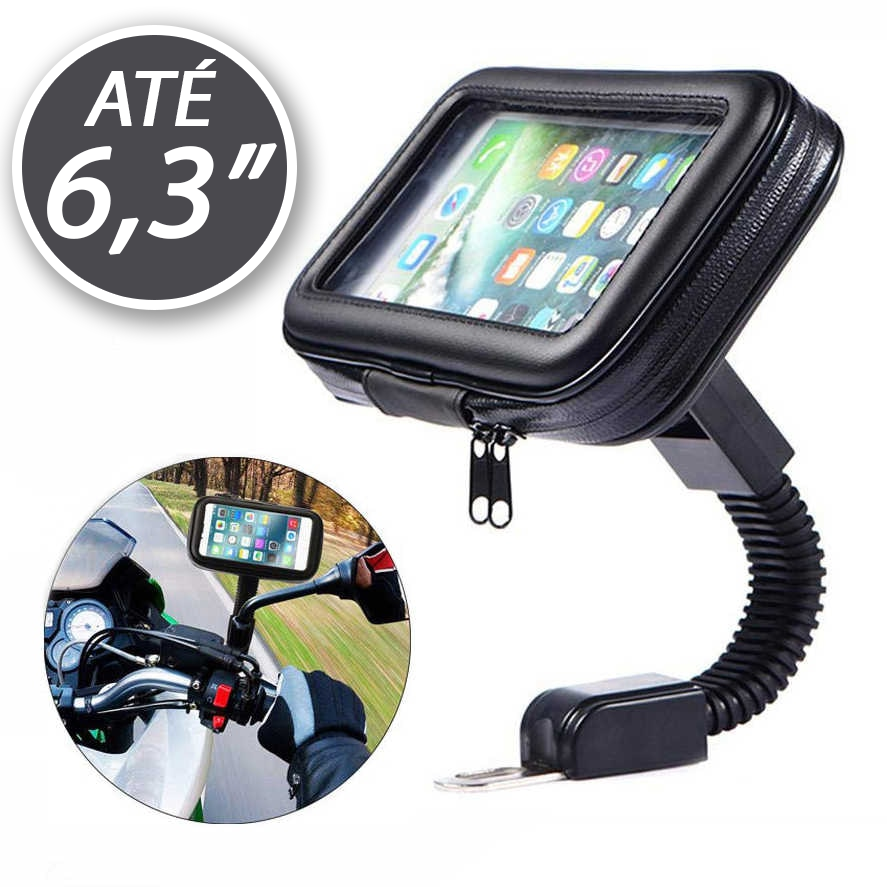
<style>
.page{position:relative;width:887px;height:887px;background:#ffffff}
.page>*{position:absolute;margin:0}
.t1{font:80px "MyriadPro-Regular";color:#ffffff;font-weight:bold;font-style:italic}
.t2{font:133.3px "MyriadPro-Regular";color:#ffffff;font-weight:bold;font-style:italic}
</style>
<div class="page">
<p class="t1" style="left:84px;top:59px;width:133px;height:67px">ATÉ</p>
<p class="t2" style="left:47px;top:143px;width:230px;height:112px">6,3”</p>
</div>
